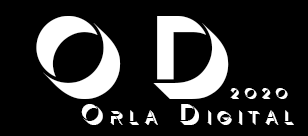
<style>
.page{position:relative;width:308px;height:136px;background:#000000}
.page>*{position:absolute;margin:0}
.t1{font:143.9px "Demode-Regular";letter-spacing:0.1em;color:#ffffff;font-variant:small-caps}
.t2{font:20.4px "Demode-Regular";letter-spacing:0.1em;color:#ffffff;font-variant:small-caps}
.t3{font:36px "Demode-Regular";letter-spacing:0.1em;color:#ffffff;font-variant:small-caps}
</style>
<div class="page">
<p class="t1" style="left:36px;top:16px;width:193px;height:83px">OD</p>
<p class="t2" style="left:230px;top:88px;width:58px;height:11px">2020</p>
<p class="t3" style="left:81px;top:104px;width:213px;height:21px">Orla Digital</p>
</div>
